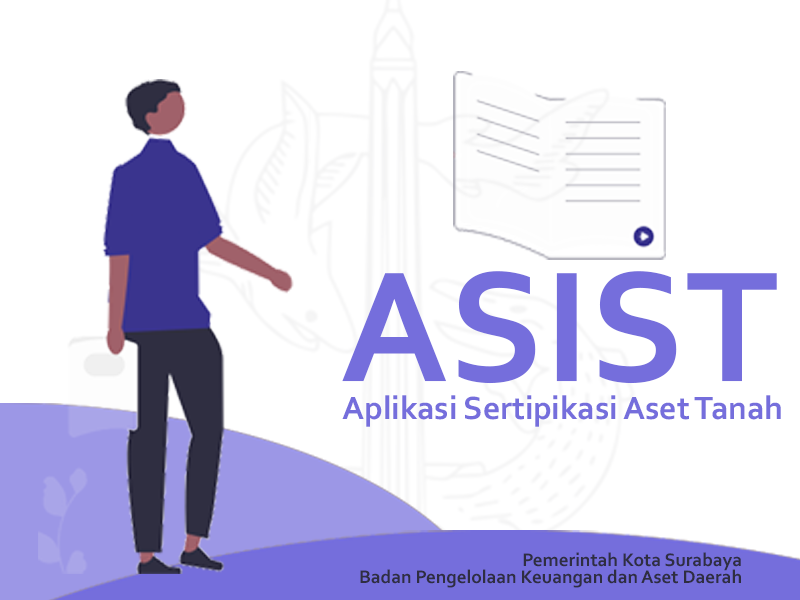
<style>
.page{position:relative;width:800px;height:600px;background:#ffffff}
.page>*{position:absolute;margin:0}
.t1{font:165.4px "Corbel-Bold";color:#756edc}
.t2{font:33.8px "Corbel-Bold";color:#756edc}
.t3{font:19.1px/17.6px "Corbel-Bold";color:#2f2e41}
</style>
<div class="page">
<p class="t1" style="left:342px;top:271px;width:435px;height:113px">ASIST</p>
<p class="t2" style="left:342px;top:395px;width:439px;height:32px">Aplikasi Sertipikasi Aset Tanah</p>
<p class="t3" style="left:360px;top:552px;width:381px;height:36px;text-align:right">Pemerintah Kota Surabaya<br>Badan Pengelolaan Keuangan dan Aset Daerah</p>
</div>
